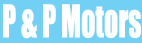
<style>
.page{position:relative;width:142px;height:43px;background:#72d0f4}
.page>*{position:absolute;margin:0}
.t1{font:41.8px "Impact";color:#ffffff;scale:0.67 1}
</style>
<div class="page">
<p class="t1" style="left:3px;top:4px;width:138px;height:35px">P &amp; P Motors</p>
</div>
